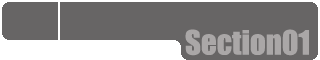
<style>
.page{position:relative;width:320px;height:60px;background:#676565}
.page>*{position:absolute;margin:0}
.t1{font:30.9px "Impact";color:#aaa7a7}
</style>
<div class="page">
<p class="t1" style="left:185px;top:29px;width:124px;height:27px">Section01</p>
</div>
